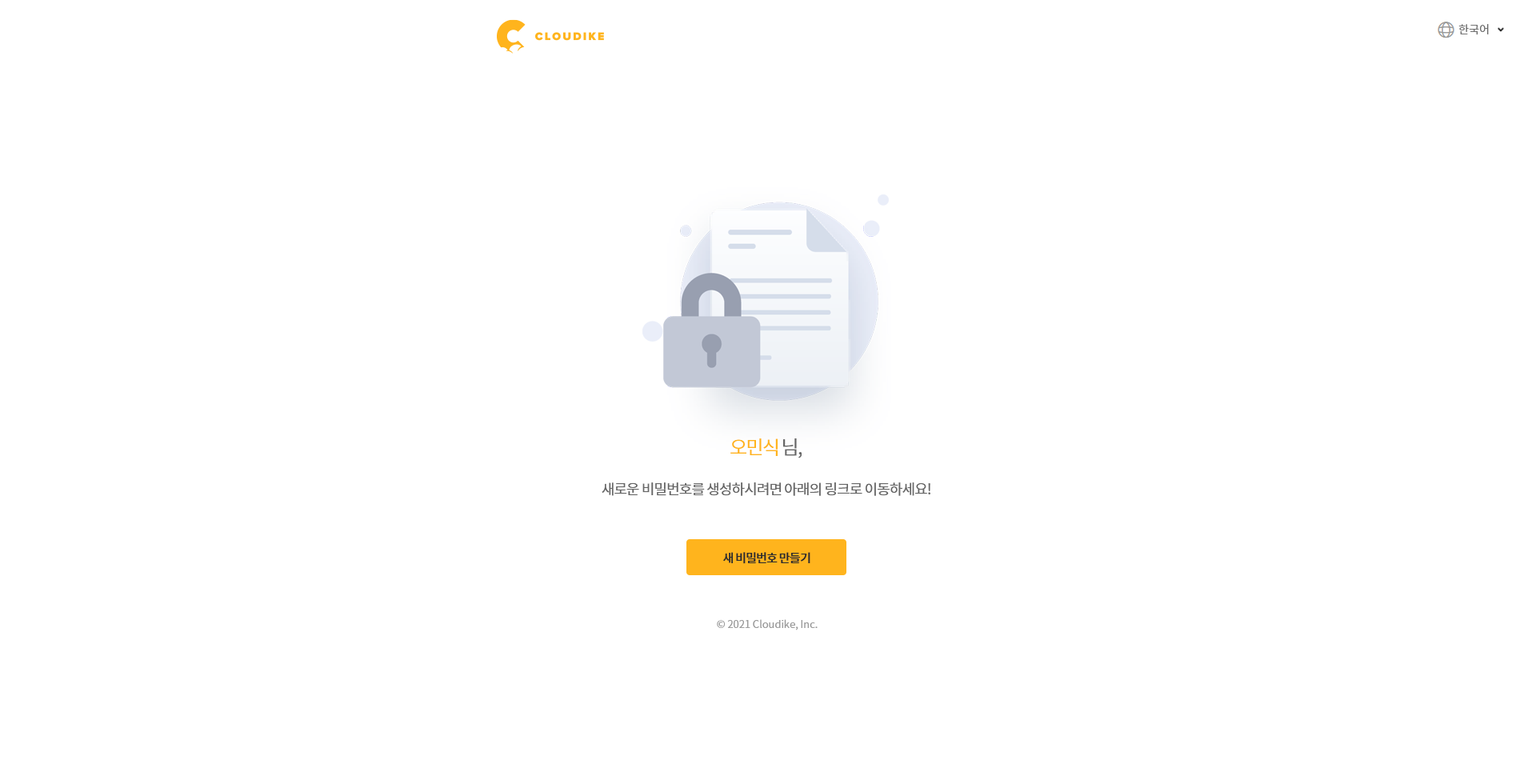
<style>
.page{position:relative;width:1536px;height:776px;background:#ffffff}
.page>*{position:absolute;margin:0}
.t1{font:11.2px "NotoSansCJKkr-DemiLight";color:#666666}
.t2{font:19.2px "NotoSansCJKkr-DemiLight";letter-spacing:-0.075em;color:#ffb41d}
.t3{font:19.2px "NotoSansCJKkr-DemiLight";letter-spacing:-0.075em;color:#666666}
.t4{font:14.4px "NotoSansCJKkr-Regular";letter-spacing:-0.05em;color:#666666}
.t5{font:12px "NotoSansCJKkr-Medium";letter-spacing:-0.05em;color:#2d2d2d}
.t6{font:10.4px "NotoSansCJKkr-DemiLight";color:#999999}
</style>
<div class="page">
<p class="t1" style="left:1459px;top:24px;width:30px;height:11px">한국어</p>
<p class="t2" style="left:731px;top:438px;width:71px;height:20px">오민식 <span class="t3">님,</span></p>
<p class="t4" style="left:602px;top:483px;width:329px;height:13px">새로운 비밀번호를 생성하시려면 아래의 링크로 이동하세요!</p>
<p class="t5" style="left:723px;top:552px;width:88px;height:12px">새 비밀번호 만들기</p>
<p class="t6" style="left:717px;top:619px;width:101px;height:12px">© 2021 Cloudike, Inc.</p>
</div>
